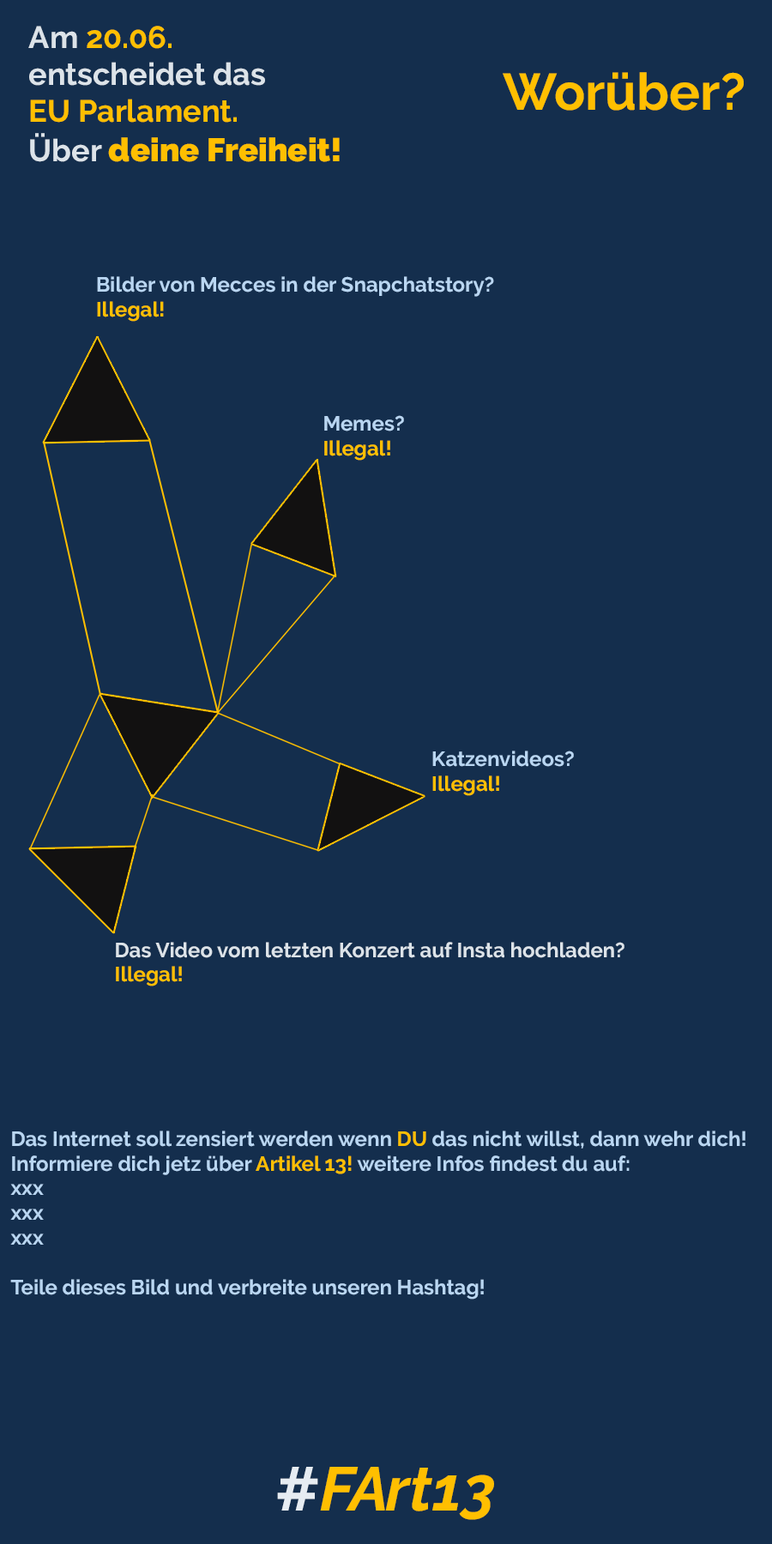
<style>
.page{position:relative;width:772px;height:1544px;background:#142e4d}
.page>*{position:absolute;margin:0}
.t1{font:30.9px "Raleway-Bold";color:#dce3e9}
.t2{font:30.9px "Raleway-Bold";color:#ffbf00}
.t3{font:32.6px "Raleway-Black";color:#ffbf00}
.t4{font:51.5px "Raleway-Bold";color:#ffbf00}
.t5{font:20.6px "Raleway-Bold";color:#b9d6f2}
.t6{font:20.6px "Raleway-Bold";color:#ffbf00}
.t7{font:20.6px "Raleway-Bold";color:#dce3e9}
.t8{font:61.8px "Raleway-BoldItalic";color:#ffbf00}
.t9{font:61.8px "Raleway-Bold";color:#e6ecf2}
.t10{font:61.8px "Raleway-BoldItalic";letter-spacing:-0.05em;color:#ffbf00}
.t11{font:61.8px "Raleway-BoldItalic";letter-spacing:0.01em;color:#ffbf00}
</style>
<div class="page">
<p class="t1" style="left:28px;top:26px;width:312px;height:136px">Am <span class="t2">20.06.<br></span>entscheidet das <br><span class="t2">EU Parlament. <br></span>Über <span class="t3">deine Freiheit!</span></p>
<p class="t4" style="left:503px;top:72px;width:241px;height:39px">Worüber?</p>
<p class="t5" style="left:97px;top:276px;width:397px;height:46px">Bilder von Mecces in der Snapchatstory?<br><span class="t6">Illegal!</span></p>
<p class="t6" style="left:324px;top:415px;width:80px;height:46px"><span class="t5">Memes?<br></span>Illegal!</p>
<p class="t5" style="left:432px;top:751px;width:142px;height:45px">Katzenvideos?<br><span class="t6">Illegal!</span></p>
<p class="t7" style="left:116px;top:942px;width:509px;height:45px">Das Video vom letzten Konzert auf Insta hochladen?<br><span class="t6">Illegal!</span></p>
<p class="t5" style="left:10px;top:1131px;width:736px;height:169px">Das Internet soll zensiert werden wenn <span class="t6">DU</span> das nicht willst, dann wehr dich!<br>Informiere dich jetz über <span class="t6">Artikel 13!</span> weitere Infos findest du auf:<br>xxx<br>xxx<br>xxx<br><br>Teile dieses Bild und verbreite unseren Hashtag!</p>
<p class="t8" style="left:277px;top:1467px;width:217px;height:53px"><span class="t9">#</span>F<span class="t10">A</span>rt<span class="t11">13</span></p>
</div>
